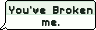
<style>
.page{position:relative;width:96px;height:30px;background:#fcfffb}
.page>*{position:absolute;margin:0}
.t1{font:10px "SFPixelate-Bold";color:#1b281e}
</style>
<div class="page">
<p class="t1" style="left:9px;top:6px;width:84px;height:19px;text-align:center">You’ve Broken<br>me.</p>
<p class="t1" style="left:9px;top:7px;width:84px;height:19px;text-align:center">You’ve Broken<br>me.</p>
</div>
